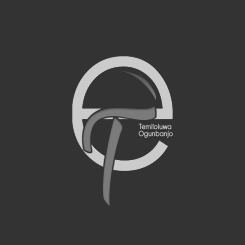
<style>
.page{position:relative;width:245px;height:245px;background:#333333}
.page>*{position:absolute;margin:0}
.t1{font:219.6px "Gilroy-Light";letter-spacing:0.04em;color:#cbcbcb;scale:0.91 1}
.t2{font:104.3px "BBBreath";letter-spacing:0.04em;color:#7b7b7b}
.t3{font:6.9px "Gilroy-Light";letter-spacing:0.02em;scale:0.91 1}
</style>
<div class="page">
<p class="t1" style="left:71px;top:55px;width:102px;height:116px">e</p>
<p class="t2" style="left:83px;top:106px;width:73px;height:100px">T</p>
<p class="t3" style="left:138px;top:123px;width:35px;height:15px">Temiloluwa <br>Ogunbanjo</p>
</div>
